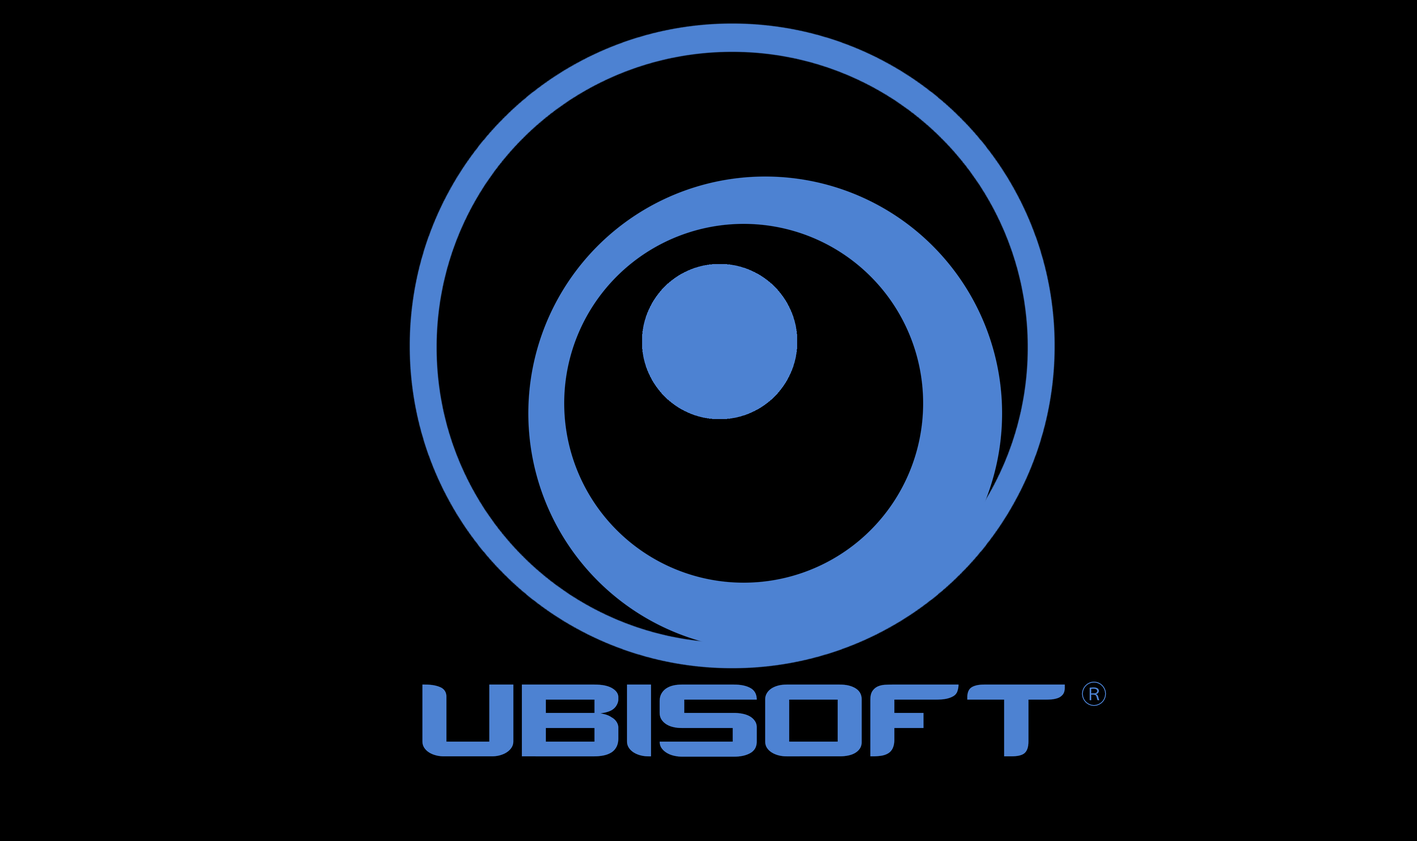
<style>
.page{position:relative;width:1417px;height:841px;background:#000000}
.page>*{position:absolute;margin:0}
.t1{font:143.6px "Counter-StrikeRegular";color:#4d82d2}
.t2{font:25.8px "KozGoPr6N-Regular";color:#4d82d2}
</style>
<div class="page">
<p class="t1" style="left:422px;top:685px;width:643px;height:72px">UBISOFT</p>
<p class="t2" style="left:1082px;top:682px;width:24px;height:24px">Ⓡ</p>
</div>
